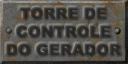
<style>
.page{position:relative;width:128px;height:64px}
.page>*{position:absolute;margin:0}
.t1{font:15.3px/18.1px "Arial-Black";letter-spacing:-0.02em;color:#2e2d2b;text-transform:uppercase;font-weight:bold}
</style>
<div class="page">
<p class="t1" style="left:6px;top:7px;width:115px;height:49px;text-align:center">torre de<br>controle<br>do gerador</p>
</div>
